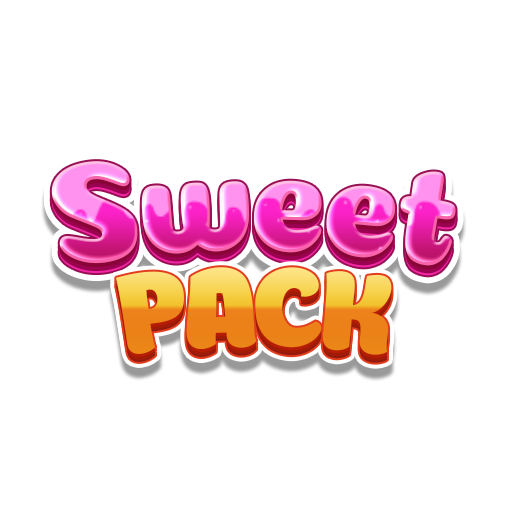
<style>
.page{position:relative;width:512px;height:512px;background:#ffffff}
.page>*{position:absolute;margin:0}
.t1{font:145.8px "Coiny-Regular";letter-spacing:-0.04em;scale:0.8 1}
.t2{font:125px "Boomboom";letter-spacing:-0.04em}
</style>
<div class="page">
<p class="t1" style="left:51px;top:161px;width:405px;height:105px">Sweet</p>
<p class="t2" style="left:116px;top:267px;width:276px;height:88px">PACK</p>
</div>
